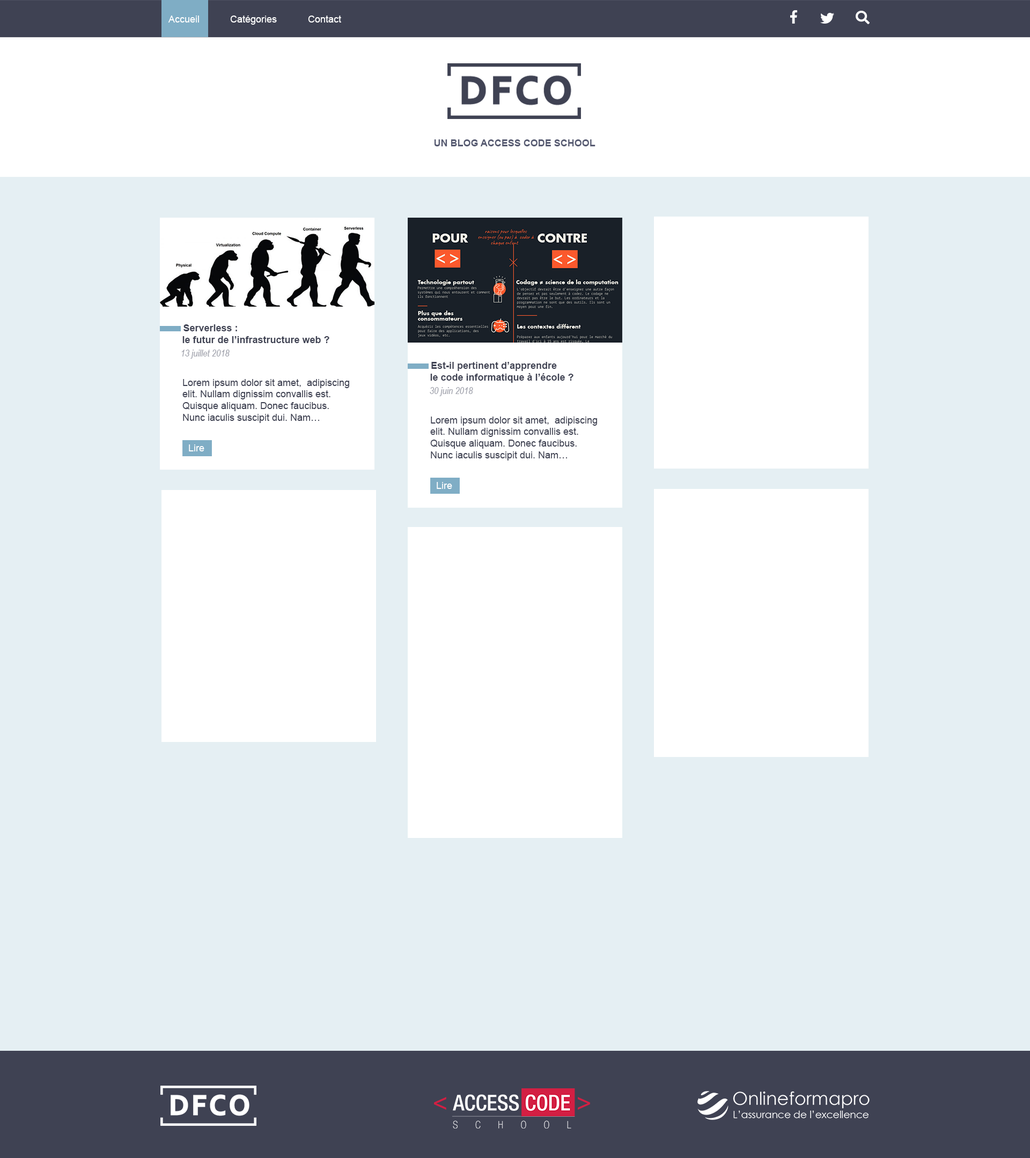
<style>
.page{position:relative;width:1030px;height:1158px;background:#e5eff3}
.page>*{position:absolute;margin:0}
.t1{font:9.7px "ArialMT";color:#ffffff}
.t2{font:9.7px "Arial-BoldMT";color:#575b72}
.t3{font:9.7px "Arial-BoldMT";color:#3f4253}
.t4{font:9.7px "ArialNarrow-Italic";color:#a2a4ae}
.t5{font:9.7px "ArialMT";color:#3f4253}
</style>
<div class="page">
<p class="t1" style="left:168px;top:16px;width:31px;height:7px">Accueil</p>
<p class="t1" style="left:230px;top:16px;width:47px;height:9px">Catégories</p>
<p class="t1" style="left:308px;top:16px;width:33px;height:7px">Contact</p>
<p class="t2" style="left:434px;top:139px;width:161px;height:7px">UN BLOG ACCESS CODE SCHOOL</p>
<p class="t3" style="left:182px;top:324px;width:147px;height:19px;text-align:center">Serverless : <br>        le futur de l’infrastructure web ?</p>
<p class="t4" style="left:181px;top:350px;width:49px;height:9px">13 juillet 2018</p>
<p class="t3" style="left:430px;top:362px;width:143px;height:21px;text-align:center">Est-il pertinent d’apprendre <br>     le code informatique à l’école ?</p>
<p class="t5" style="left:182px;top:379px;width:167px;height:44px">Lorem ipsum dolor sit amet,  adipiscing elit. Nullam dignissim convallis est. Quisque aliquam. Donec faucibus. Nunc iaculis suscipit dui. Nam…</p>
<p class="t4" style="left:430px;top:387px;width:43px;height:9px">30 juin 2018</p>
<p class="t5" style="left:430px;top:417px;width:167px;height:44px">Lorem ipsum dolor sit amet,  adipiscing elit. Nullam dignissim convallis est. Quisque aliquam. Donec faucibus. Nunc iaculis suscipit dui. Nam…</p>
<p class="t1" style="left:189px;top:445px;width:15px;height:6px">Lire</p>
<p class="t1" style="left:436px;top:482px;width:16px;height:7px">Lire</p>
</div>
